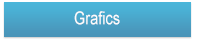
<style>
.page{position:relative;width:210px;height:40px}
.page>*{position:absolute;margin:0}
.t1{font:17.8px "ArialMT";color:#fcfcfc;scale:0.82 1}
</style>
<div class="page">
<p class="t1" style="left:74px;top:11px;width:46px;height:14px">Grafics</p>
</div>
